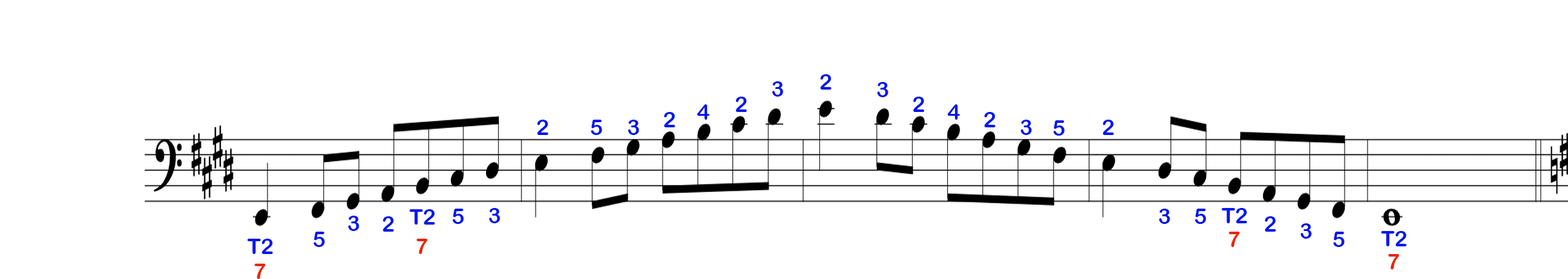
<style>
.page{position:relative;width:1568px;height:279px;background:#ffffff}
.page>*{position:absolute;margin:0}
.t1{font:21.8px "ArialRoundedMTBold";color:#0417ec}
.t2{font:21.8px "ArialRoundedMTBold";color:#ec2404}
</style>
<div class="page">
<p class="t1" style="left:820px;top:74px;width:11px;height:16px">2</p>
<p class="t1" style="left:772px;top:81px;width:11px;height:16px">3</p>
<p class="t1" style="left:877px;top:82px;width:11px;height:15px">3</p>
<p class="t1" style="left:735px;top:97px;width:12px;height:15px">2</p>
<p class="t1" style="left:913px;top:97px;width:11px;height:15px">2</p>
<p class="t1" style="left:664px;top:112px;width:11px;height:15px">2</p>
<p class="t1" style="left:697px;top:104px;width:13px;height:16px">4</p>
<p class="t1" style="left:947px;top:104px;width:13px;height:16px">4</p>
<p class="t1" style="left:984px;top:112px;width:11px;height:15px">2</p>
<p class="t1" style="left:537px;top:120px;width:11px;height:15px">2</p>
<p class="t1" style="left:591px;top:120px;width:11px;height:15px">5</p>
<p class="t1" style="left:628px;top:120px;width:11px;height:15px">3</p>
<p class="t1" style="left:1020px;top:120px;width:12px;height:15px">3</p>
<p class="t1" style="left:1053px;top:120px;width:12px;height:16px">5</p>
<p class="t1" style="left:1102px;top:120px;width:12px;height:15px">2</p>
<p class="t1" style="left:409px;top:209px;width:26px;height:16px">T2</p>
<p class="t1" style="left:452px;top:209px;width:12px;height:15px">5</p>
<p class="t1" style="left:489px;top:208px;width:11px;height:16px">3</p>
<p class="t1" style="left:1159px;top:209px;width:11px;height:15px">3</p>
<p class="t1" style="left:1195px;top:209px;width:11px;height:15px">5</p>
<p class="t1" style="left:1221px;top:208px;width:26px;height:16px">T2</p>
<p class="t1" style="left:348px;top:216px;width:11px;height:15px">3</p>
<p class="t1" style="left:382px;top:216px;width:12px;height:16px">2</p>
<p class="t1" style="left:1264px;top:216px;width:12px;height:16px">2</p>
<p class="t1" style="left:313px;top:232px;width:12px;height:15px">5</p>
<p class="t2" style="left:1229px;top:232px;width:11px;height:15px">7</p>
<p class="t1" style="left:1300px;top:224px;width:12px;height:15px">3</p>
<p class="t1" style="left:1333px;top:232px;width:11px;height:15px">5</p>
<p class="t1" style="left:1381px;top:231px;width:26px;height:16px">T2</p>
<p class="t1" style="left:247px;top:239px;width:26px;height:15px">T2</p>
<p class="t2" style="left:416px;top:239px;width:12px;height:15px">7</p>
<p class="t2" style="left:1388px;top:254px;width:12px;height:16px">7</p>
<p class="t2" style="left:254px;top:264px;width:12px;height:15px">7</p>
</div>
